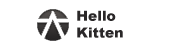
<style>
.page{position:relative;width:185px;height:50px;background:#ffffff}
.page>*{position:absolute;margin:0}
.t1{font:14px "Arial-Black";color:#2a2728}
</style>
<div class="page">
<p class="t1" style="left:77px;top:10px;width:46px;height:28px">Hello <br>Kitten</p>
</div>
